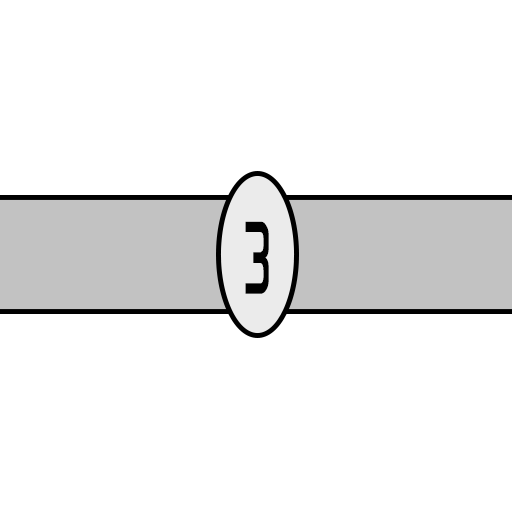
<style>
.page{position:relative;width:512px;height:512px;background:#ffffff}
.page>*{position:absolute;margin:0}
.t1{font:99.9px "PrisonerSF";color:#000000;scale:0.5 1}
</style>
<div class="page">
<p class="t1" style="left:245px;top:221px;width:24px;height:73px">3</p>
</div>
